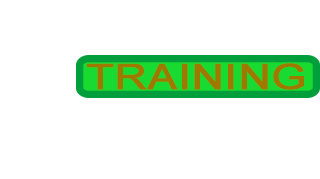
<style>
.page{position:relative;width:320px;height:179px;background:#ffffff}
.page>*{position:absolute;margin:0}
.t1{font:35.4px "ArialMT";color:#9f7800;font-weight:bold;scale:1.25 1}
</style>
<div class="page">
<p class="t1" style="left:87px;top:63px;width:217px;height:27px">TRAINING</p>
</div>
